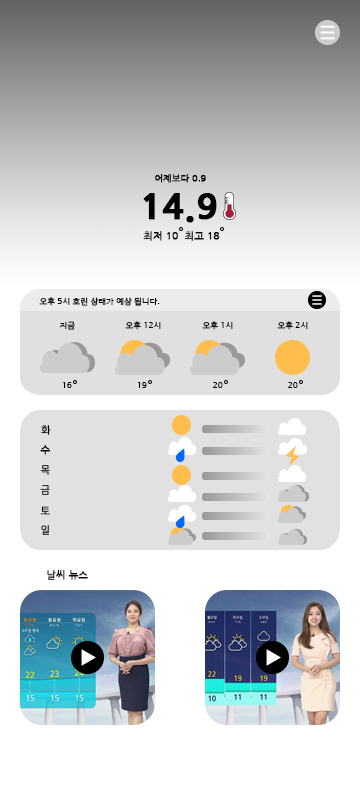
<style>
.page{position:relative;width:360px;height:796px;background:#ffffff}
.page>*{position:absolute;margin:0}
.t1{font:9px "NanumGothic";color:#000000;font-weight:bold}
.t2{font:35px "NanumGothicExtraBold";color:#000000;font-weight:bold}
.t3{font:10px "NanumGothic";color:#000000;font-weight:bold}
.t4{font:8px "NanumGothic";color:#000000;font-weight:bold}
.t5{font:10px "NanumGothic";font-weight:bold}
</style>
<div class="page">
<p class="t1" style="left:155px;top:174px;width:51px;height:9px">어제보다 0.9</p>
<p class="t2" style="left:143px;top:193px;width:74px;height:30px">14.9</p>
<p class="t3" style="left:143px;top:231px;width:77px;height:10px">최저 10  최고 18</p>
<p class="t4" style="left:39px;top:297px;width:121px;height:9px">오후 5시 흐린 상태가 예상 됩니다.</p>
<p class="t4" style="left:60px;top:321px;width:15px;height:9px">지금</p>
<p class="t4" style="left:125px;top:321px;width:36px;height:9px">오후 12시</p>
<p class="t4" style="left:202px;top:321px;width:31px;height:9px">오후 1시</p>
<p class="t4" style="left:277px;top:321px;width:31px;height:9px">오후 2시</p>
<p class="t4" style="left:62px;top:382px;width:10px;height:6px">16</p>
<p class="t4" style="left:137px;top:382px;width:10px;height:6px">19</p>
<p class="t4" style="left:213px;top:382px;width:10px;height:6px">20</p>
<p class="t4" style="left:288px;top:382px;width:10px;height:6px">20</p>
<p class="t3" style="left:41px;top:425px;width:10px;height:10px">화</p>
<p class="t3" style="left:40px;top:445px;width:10px;height:10px">수</p>
<p class="t5" style="left:40px;top:465px;width:10px;height:10px">목</p>
<p class="t5" style="left:40px;top:485px;width:10px;height:10px">금</p>
<p class="t3" style="left:40px;top:506px;width:10px;height:9px">토</p>
<p class="t5" style="left:41px;top:525px;width:9px;height:10px">일</p>
<p class="t3" style="left:47px;top:570px;width:41px;height:10px">날씨 뉴스</p>
</div>
